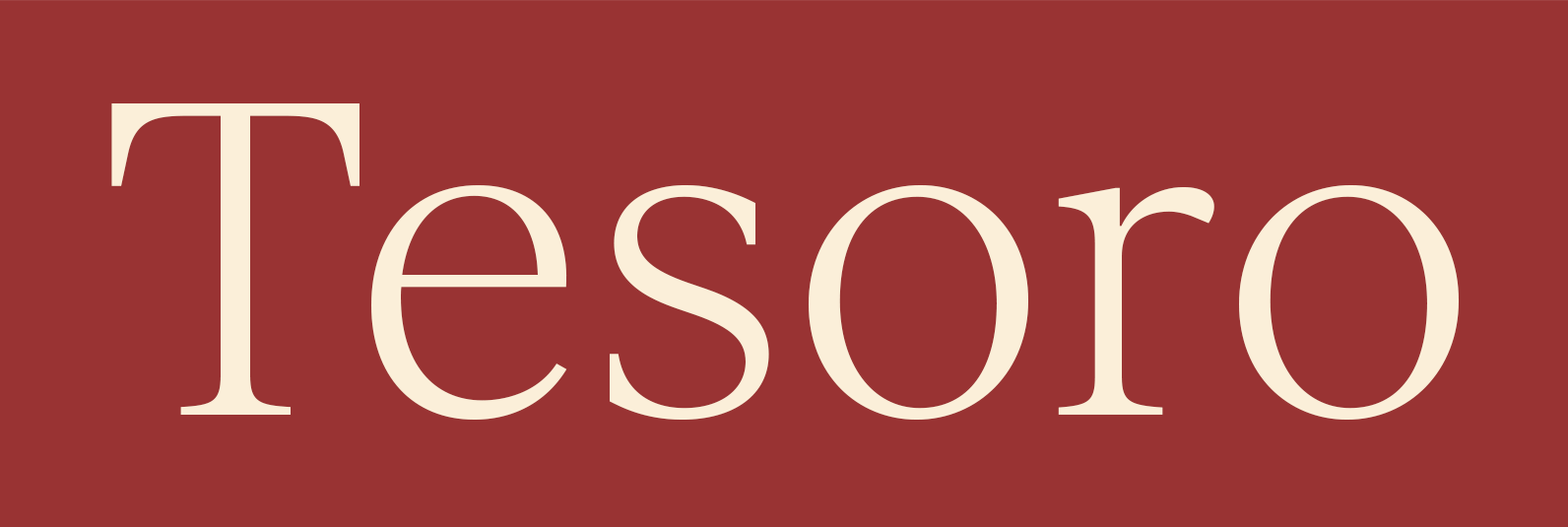
<style>
.page{position:relative;width:1568px;height:527px;background:#993333}
.page>*{position:absolute;margin:0}
.t1{font:427.2px "IvyJournal-Light";letter-spacing:0.02em;color:#fbefd9}
</style>
<div class="page">
<p class="t1" style="left:111px;top:103px;width:1348px;height:317px">Tesoro</p>
</div>
